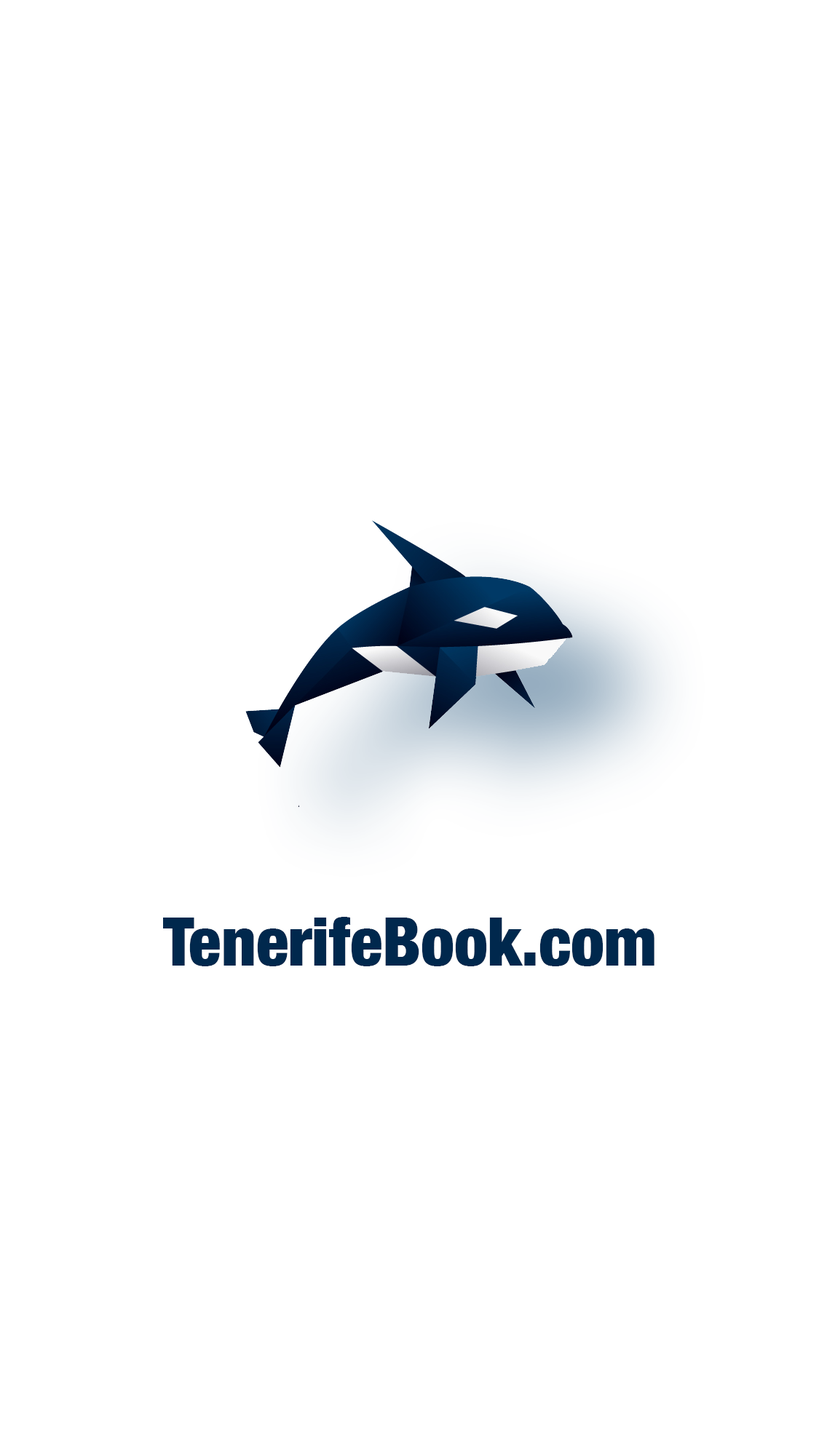
<style>
.page{position:relative;width:819px;height:1456px;background:#ffffff}
.page>*{position:absolute;margin:0}
.t1{font:67px "HelveticaNeue-CondensedBlack";color:#00284d}
</style>
<div class="page">
<p class="t1" style="left:163px;top:917px;width:491px;height:50px">TenerifeBook.com</p>
</div>
